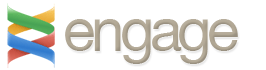
<style>
.page{position:relative;width:266px;height:70px;background:#ffffff}
.page>*{position:absolute;margin:0}
.t1{font:60px "HelveticaNeue";letter-spacing:-0.075em;color:#b2a895}
</style>
<div class="page">
<p class="t1" style="left:65px;top:19px;width:173px;height:45px">engage</p>
</div>
